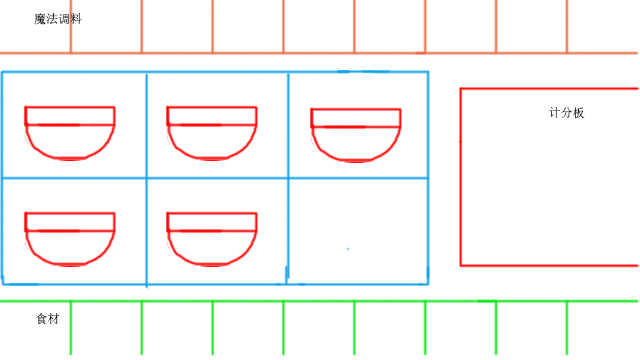
<style>
.page{position:relative;width:640px;height:360px;background:#ffffff}
.page>*{position:absolute;margin:0}
.t1{font:12px "SimSun"}
.t2{font:12px "SimSun";color:#000000}
</style>
<div class="page">
<p class="t1" style="left:34px;top:13px;width:48px;height:12px">魔法调料</p>
<p class="t1" style="left:549px;top:107px;width:36px;height:12px">计分板</p>
<p class="t2" style="left:36px;top:313px;width:24px;height:12px">食材</p>
</div>
